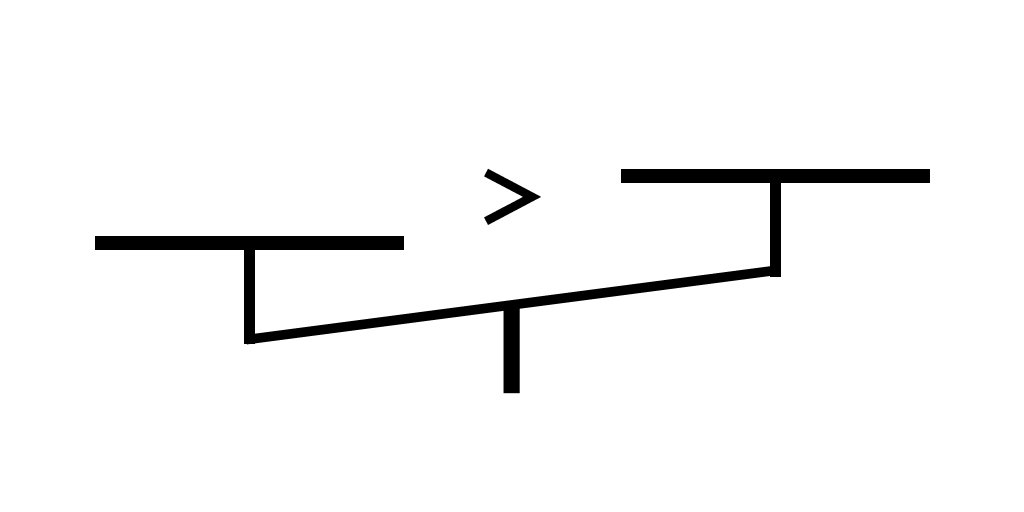
<style>
.page{position:relative;width:1024px;height:512px;background:#ffffff}
.page>*{position:absolute;margin:0}
.t1{font:72px "KozGoPr6N-Heavy";color:#000000}
</style>
<div class="page">
<p class="t1" style="left:484px;top:168px;width:57px;height:57px">＞</p>
</div>
